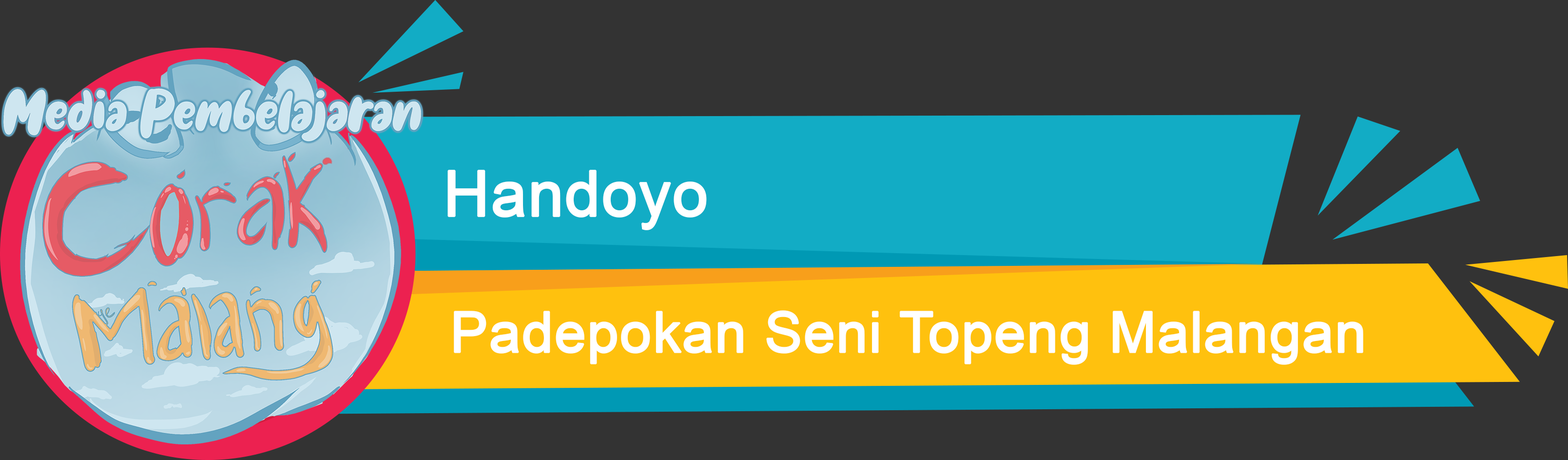
<style>
.page{position:relative;width:1568px;height:460px;background:#333333}
.page>*{position:absolute;margin:0}
.t1{font:63.4px "ArialMT";color:#ffffff;font-weight:bold}
.t2{font:56.1px "ArialMT";color:#ffffff;font-weight:bold}
</style>
<div class="page">
<p class="t1" style="left:447px;top:170px;width:260px;height:60px">Handoyo</p>
<p class="t2" style="left:454px;top:310px;width:909px;height:55px">Padepokan Seni Topeng Malangan</p>
</div>
